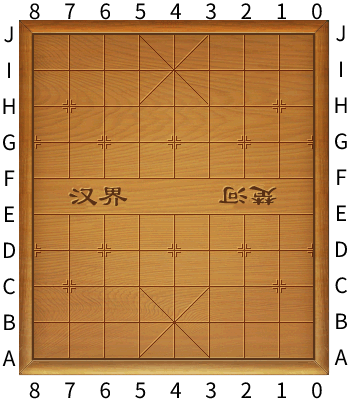
<style>
.page{position:relative;width:352px;height:403px}
.page>*{position:absolute;margin:0}
.t1{font:21px "Arial";letter-spacing:1.125em;color:#000000}
.t2{font:21px/36px "Arial";letter-spacing:0.015em;color:#000000}
</style>
<div class="page">
<p class="t1" style="left:29px;top:3px;width:293px;height:17px">876543210</p>
<p class="t2" style="left:2px;top:26px;width:14px;height:340px;text-align:center">J<br>I<br>H<br>G<br>F<br>E<br>D<br>C<br>B<br>A</p>
<p class="t2" style="left:334px;top:25px;width:14px;height:340px;text-align:center">J<br>I<br>H<br>G<br>F<br>E<br>D<br>C<br>B<br>A</p>
<p class="t1" style="left:29px;top:382px;width:293px;height:17px">876543210</p>
</div>
